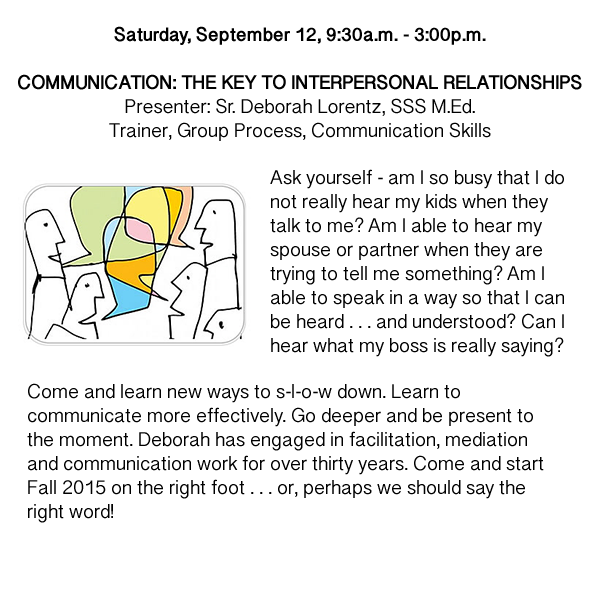
<style>
.page{position:relative;width:600px;height:600px;background:#ffffff}
.page>*{position:absolute;margin:0}
.t1{font:20px/24px "TamilSangamMN-Bold";color:#000000}
.t2{font:20px/24px "TamilSangamMN";color:#000000}
</style>
<div class="page">
<p class="t1" style="left:18px;top:26px;width:564px;height:115px;text-align:center">Saturday, September 12, 9:30a.m. - 3:00p.m.<br><br>COMMUNICATION: THE KEY TO INTERPERSONAL RELATIONSHIPS<br><span class="t2">Presenter: Sr. Deborah Lorentz, SSS M.Ed.<br>Trainer, Group Process, Communication Skills</span></p>
<p class="t2" style="left:270px;top:169px;width:294px;height:188px">Ask yourself - am I so busy that I do not really hear my kids when they talk to me? Am I able to hear my spouse or partner when they are trying to tell me something? Am I able to speak in a way so that I can be heard . . . and understood? Can I hear what my boss is really saying?</p>
<p class="t2" style="left:27px;top:383px;width:517px;height:140px">Come and learn new ways to s-l-o-w down. Learn to communicate more effectively. Go deeper and be present to the moment. Deborah has engaged in facilitation, mediation and communication work for over thirty years. Come and start Fall 2015 on the right foot . . . or, perhaps we should say the right word!</p>
</div>
